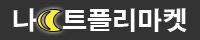
<style>
.page{position:relative;width:200px;height:40px;background:#333333}
.page>*{position:absolute;margin:0}
.t1{font:25px "H2gtrE";color:#ffffff}
</style>
<div class="page">
<p class="t1" style="left:13px;top:8px;width:174px;height:24px">나   트플리마켓</p>
</div>
